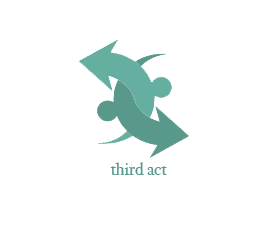
<style>
.page{position:relative;width:270px;height:244px;background:#ffffff}
.page>*{position:absolute;margin:0}
.t1{font:18px "BodoniSvtyTwoITCTT-Book";color:#59998c}
</style>
<div class="page">
<p class="t1" style="left:110px;top:162px;width:57px;height:13px">third act</p>
</div>
